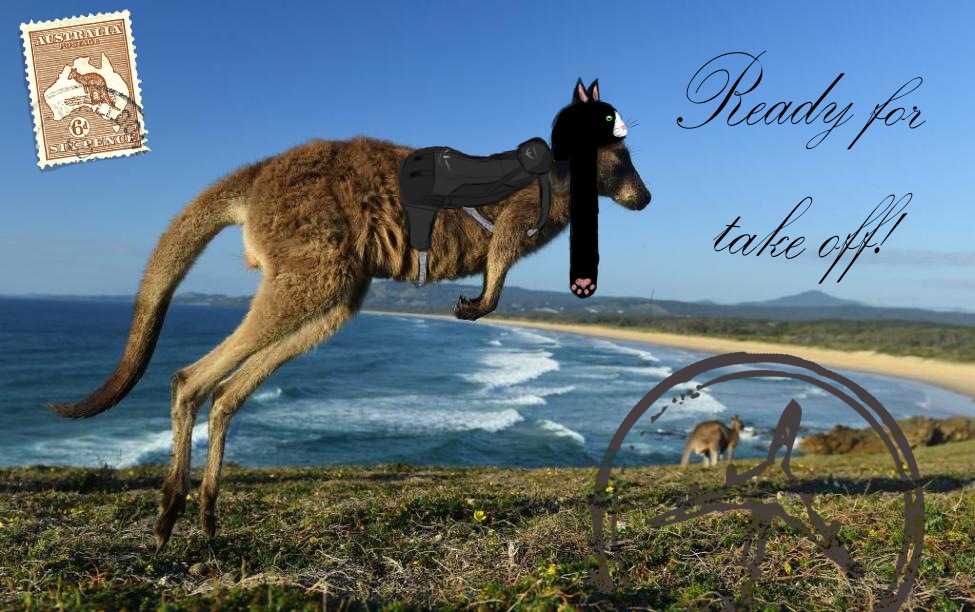
<style>
.page{position:relative;width:975px;height:612px}
.page>*{position:absolute;margin:0}
.t1{font:90px "KunstlerScript";color:#000000}
</style>
<div class="page">
<p class="t1" style="left:676px;top:50px;width:250px;height:234px;text-align:center">Ready for <br>take off!</p>
</div>
